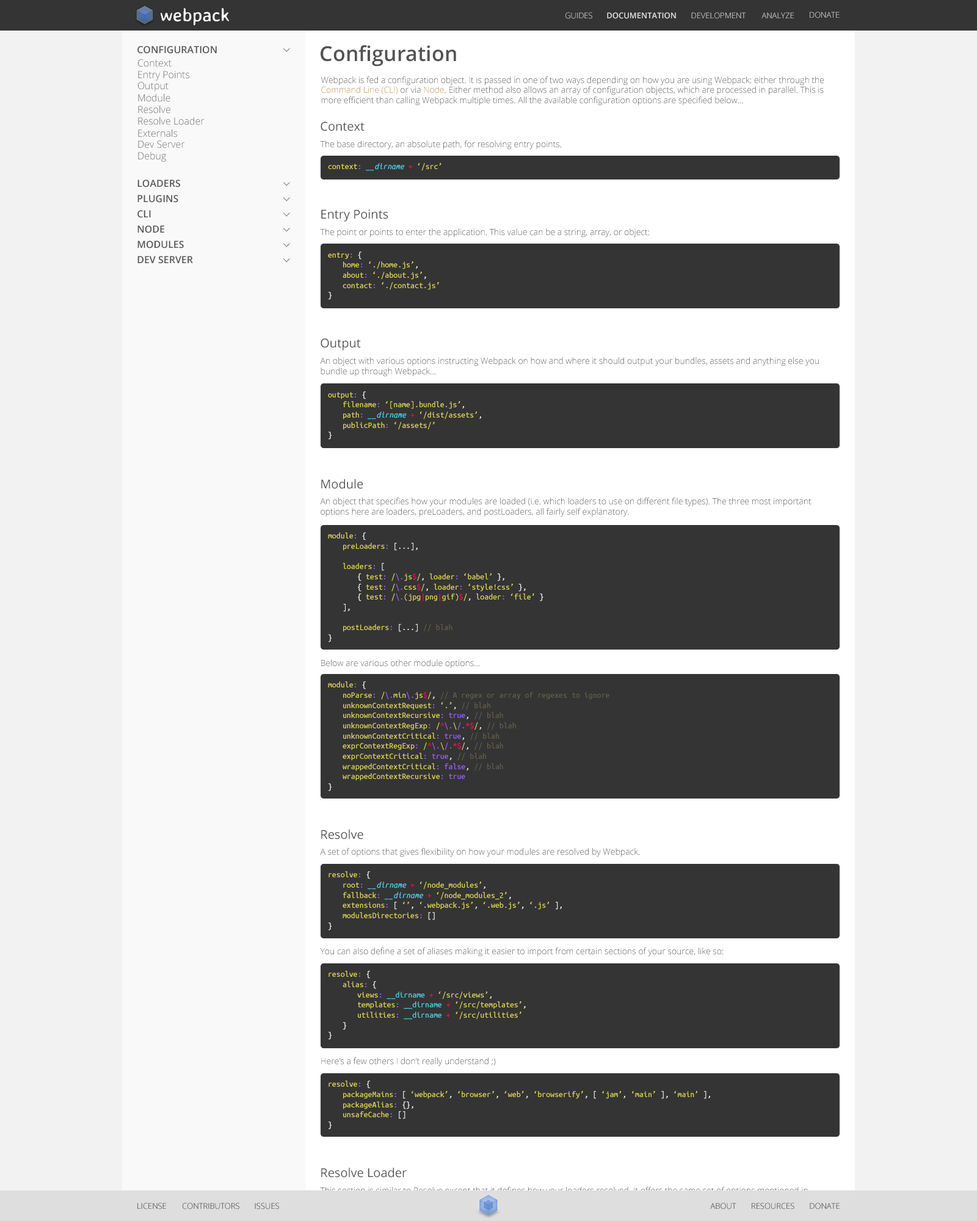
<style>
.page{position:relative;width:977px;height:1221px;background:#f2f2f2}
.page>*{position:absolute;margin:0}
.t1{font:18.7px "AveriaSansLibre-Regular";color:#ffffff}
.t2{font:7.9px "OpenSans-Light"}
.t3{font:7.9px "OpenSans-Semibold";color:#dedede}
.t4{font:7.9px "OpenSans-Light";color:#dedede}
.t5{font:9.8px "OpenSans-Semibold";color:#535353}
.t6{font:20.8px "OpenSans-Semibold";color:#535353}
.t7{font:9.8px "OpenSans-Light";color:#666666}
.t8{font:8.5px "OpenSans-Light";color:#535353}
.t9{font:8.5px "OpenSans-Light";color:#c0903f}
.t10{font:9.8px "OpenSans-Light"}
.t11{font:12.2px "OpenSans";color:#535353}
.t12{font:8.5px "UbuntuMono-Italic";color:#53d1ed}
.t13{font:8.5px "UbuntuMono-Regular";color:#dfd659}
.t14{font:8.5px "UbuntuMono-Regular";color:#9d60ff}
.t15{font:8.5px "UbuntuMono-Regular";color:#f7005e}
.t16{font:8.5px "UbuntuMono-Regular";color:#f2f2f2}
.t17{font:8.5px "UbuntuMono-Regular";color:#615e4a}
.t18{font:8.5px "UbuntuMono-Regular";color:#53d1ed}
.t19{font:8.5px "OpenSans-Light";color:#dedede}
</style>
<div class="page">
<p class="t1" style="left:161px;top:8px;width:68px;height:18px">webpack</p>
<p class="t2" style="left:565px;top:12px;width:27px;height:7px">GUIDES</p>
<p class="t3" style="left:607px;top:12px;width:69px;height:7px">DOCUMENTATION</p>
<p class="t4" style="left:691px;top:12px;width:55px;height:7px">DEVELOPMENT</p>
<p class="t2" style="left:761px;top:12px;width:33px;height:6px">ANALYZE</p>
<p class="t2" style="left:809px;top:12px;width:30px;height:6px">DONATE</p>
<p class="t5" style="left:137px;top:46px;width:80px;height:8px">CONFIGURATION</p>
<p class="t6" style="left:320px;top:45px;width:136px;height:22px">Configuration</p>
<p class="t7" style="left:138px;top:59px;width:34px;height:8px">Context</p>
<p class="t7" style="left:138px;top:71px;width:52px;height:10px">Entry Points</p>
<p class="t8" style="left:321px;top:76px;width:503px;height:30px">Webpack is fed a configuration object. It is passed in one of two ways depending on how you are using Webpack: either through the <span class="t9">Command Line (CLI)</span> or via <span class="t9">Node</span>. Either method also allows an array of configuration objects, which are processed in parallel. This is more efficient than calling Webpack multiple times. All the available configuration options are specified below...</p>
<p class="t7" style="left:138px;top:82px;width:30px;height:10px">Output</p>
<p class="t7" style="left:138px;top:93px;width:32px;height:9px">Module</p>
<p class="t10" style="left:138px;top:105px;width:32px;height:9px">Resolve</p>
<p class="t7" style="left:138px;top:117px;width:66px;height:8px">Resolve Loader</p>
<p class="t11" style="left:320px;top:121px;width:44px;height:10px">Context</p>
<p class="t10" style="left:138px;top:129px;width:40px;height:8px">Externals</p>
<p class="t10" style="left:138px;top:140px;width:47px;height:8px">Dev Server</p>
<p class="t8" style="left:320px;top:140px;width:241px;height:10px">The base directory, an absolute path, for resolving entry points.</p>
<p class="t10" style="left:138px;top:151px;width:28px;height:11px">Debug</p>
<p class="t12" style="left:328px;top:163px;width:113px;height:8px"><span class="t13">context</span><span class="t14">: </span>__dirname <span class="t15">+ </span><span class="t13">‘/src’</span></p>
<p class="t5" style="left:137px;top:179px;width:43px;height:8px">LOADERS</p>
<p class="t5" style="left:137px;top:195px;width:41px;height:8px">PLUGINS</p>
<p class="t5" style="left:137px;top:210px;width:14px;height:8px">CLI</p>
<p class="t11" style="left:321px;top:209px;width:67px;height:13px">Entry Points</p>
<p class="t5" style="left:137px;top:225px;width:27px;height:8px">NODE</p>
<p class="t8" style="left:320px;top:228px;width:329px;height:9px">The point or points to enter the application. This value can be a string, array, or object:</p>
<p class="t5" style="left:137px;top:241px;width:47px;height:7px">MODULES</p>
<p class="t5" style="left:137px;top:256px;width:56px;height:8px">DEV SERVER</p>
<p class="t13" style="left:328px;top:252px;width:111px;height:48px">entry<span class="t14">:</span><span class="t16"> {<br>  </span>home<span class="t14">: </span>‘./home.js’<span class="t16">,<br>  </span>about<span class="t14">: </span>‘./about.js’<span class="t16">,<br>  </span>contact<span class="t14">: </span>‘./contact.js’<br><span class="t16">}</span></p>
<p class="t11" style="left:320px;top:338px;width:41px;height:12px">Output</p>
<p class="t8" style="left:320px;top:357px;width:499px;height:20px">An object with various options instructing Webpack on how and where it should output your bundles, assets and anything else you bundle up through Webpack...</p>
<p class="t13" style="left:328px;top:391px;width:153px;height:49px">output<span class="t14">:</span><span class="t16"> {<br>  </span>filename<span class="t14">: </span>‘[name].bundle.js’<span class="t16">,<br>  </span>path<span class="t14">: </span><span class="t12">__dirname </span><span class="t15">+ </span>‘/dist/assets’<span class="t16">,<br>  </span>publicPath<span class="t14">: </span>‘/assets/’<br><span class="t16">}</span></p>
<p class="t11" style="left:321px;top:479px;width:42px;height:10px">Module</p>
<p class="t8" style="left:320px;top:498px;width:491px;height:19px">An object that specifies how your modules are loaded (i.e. which loaders to use on different file types). The three most important options here are loaders, preLoaders, and postLoaders, all fairly self explanatory.</p>
<p class="t13" style="left:328px;top:532px;width:215px;height:110px">module<span class="t14">: </span><span class="t16">{<br>  </span>preLoaders<span class="t14">:</span><span class="t16"> [...],<br><br>  </span>loaders<span class="t14">:</span><span class="t16"> [<br>    { </span>test<span class="t14">: </span>/<span class="t14">\.</span>js<span class="t15">$</span>/<span class="t16">, </span>loader<span class="t14">: </span>‘babel’<span class="t16"> },<br>    { </span>test<span class="t14">: </span>/<span class="t14">\.</span>css<span class="t15">$</span>/<span class="t16">, </span>loader<span class="t14">: </span>‘style!css’<span class="t16"> },<br>    { </span>test<span class="t14">: </span>/<span class="t14">\.</span>(jpg<span class="t15">|</span>png<span class="t15">|</span>gif)<span class="t15">$</span>/<span class="t16">, </span>loader<span class="t14">: </span>‘file’<span class="t16"> }<br>  ],<br><br>  </span>postLoaders<span class="t14">:</span><span class="t16"> [...] </span><span class="t17">// blah<br></span><span class="t16">}</span></p>
<p class="t8" style="left:321px;top:659px;width:158px;height:9px">Below are various other module options...</p>
<p class="t17" style="left:328px;top:681px;width:281px;height:110px"><span class="t13">module</span><span class="t14">: </span><span class="t16">{<br>  </span><span class="t13">noParse</span><span class="t14">: </span><span class="t13">/</span><span class="t14">\.</span><span class="t13">min</span><span class="t14">\.</span><span class="t13">js</span><span class="t15">$</span><span class="t13">/</span><span class="t16">, </span>// A regex or array of regexes to ignore<br>  <span class="t13">unknownContextRequest</span><span class="t14">: </span><span class="t13">‘.’</span><span class="t16">, </span>// blah<br>  <span class="t13">unknownContextRecursive</span><span class="t14">: true</span><span class="t16">, </span>// blah<br>  <span class="t13">unknownContextRegExp</span><span class="t14">: </span><span class="t13">/</span><span class="t15">^</span><span class="t14">\.</span><span class="t13">\</span><span class="t14">/.</span><span class="t15">*$</span><span class="t13">/</span><span class="t16">, </span>// blah<br>  <span class="t13">unknownContextCritical</span><span class="t14">: true</span><span class="t16">, </span>// blah<br>  <span class="t13">exprContextRegExp</span><span class="t14">: </span><span class="t13">/</span><span class="t15">^</span><span class="t14">\.</span><span class="t13">\</span><span class="t14">/.</span><span class="t15">*$</span><span class="t13">/</span><span class="t16">, </span>// blah<br>  <span class="t13">exprContextCritical</span><span class="t14">: true</span><span class="t16">, </span>// blah<br>  <span class="t13">wrappedContextCritical</span><span class="t14">: false</span><span class="t16">, </span>// blah<br>  <span class="t13">wrappedContextRecursive</span><span class="t14">: true<br></span><span class="t16">}</span></p>
<p class="t11" style="left:321px;top:829px;width:42px;height:10px">Resolve</p>
<p class="t8" style="left:320px;top:848px;width:320px;height:9px">A set of options that gives flexibility on how your modules are resolved by Webpack.</p>
<p class="t13" style="left:328px;top:871px;width:234px;height:59px">resolve<span class="t14">:</span><span class="t16"> {<br>  </span>root<span class="t14">: </span><span class="t12">__dirname </span><span class="t15">+ </span>‘/node_modules’<span class="t16">,<br>  </span>fallback<span class="t14">: </span><span class="t12">__dirname </span><span class="t15">+</span> ‘/node_modules_2’<span class="t16">,<br>  </span>extensions<span class="t14">:</span><span class="t16"> [ </span>‘’<span class="t16">, </span>‘.webpack.js’<span class="t16">,</span> ‘.web.js’<span class="t16">,</span> ‘.js’ <span class="t16">],<br>  </span>modulesDirectories<span class="t14">:</span><span class="t16"> []<br>}</span></p>
<p class="t8" style="left:320px;top:947px;width:403px;height:10px">You can also define a set of aliases making it easier to import from certain sections of your source, like so:</p>
<p class="t13" style="left:328px;top:971px;width:198px;height:69px">resolve<span class="t14">:</span><span class="t16"> {<br>  </span>alias<span class="t14">:</span><span class="t16"> {<br>    </span>views<span class="t14">: </span><span class="t18">__dirname </span><span class="t15">+ </span>‘/src/views’<span class="t16">,<br>    </span>templates<span class="t14">: </span><span class="t18">__dirname </span><span class="t15">+ </span>‘/src/templates’<span class="t16">,<br>    </span>utilities<span class="t14">: </span><span class="t18">__dirname </span><span class="t15">+ </span>‘/src/utilities’<span class="t16"><br>  }<br>}</span></p>
<p class="t8" style="left:321px;top:1057px;width:175px;height:9px">Here’s a few others I don’t really understand ;)</p>
<p class="t13" style="left:328px;top:1080px;width:382px;height:49px">resolve<span class="t14">:</span><span class="t16"> {<br>  </span>packageMains<span class="t14">:</span><span class="t16"> [ </span>‘webpack’<span class="t16">, </span>‘browser’<span class="t16">, </span>‘web’<span class="t16">, </span>‘browserify’<span class="t16">, [ </span>‘jam’<span class="t16">, </span>‘main’ <span class="t16">], </span>‘main’<span class="t16"> ],<br>  </span>packageAlias<span class="t14">:</span><span class="t16"> {},<br>  </span>unsafeCache<span class="t14">:</span><span class="t16"> []<br>}</span></p>
<p class="t11" style="left:321px;top:1167px;width:86px;height:11px">Resolve Loader</p>
<p class="t19" style="left:320px;top:1187px;width:488px;height:19px">This section is similar to Resolve except that it defines how your loaders resolved. It offers the same set of options mentioned in Resolve plus moduleTemplates, which allows alternatives to the default loader templates (shown below):</p>
</div>
